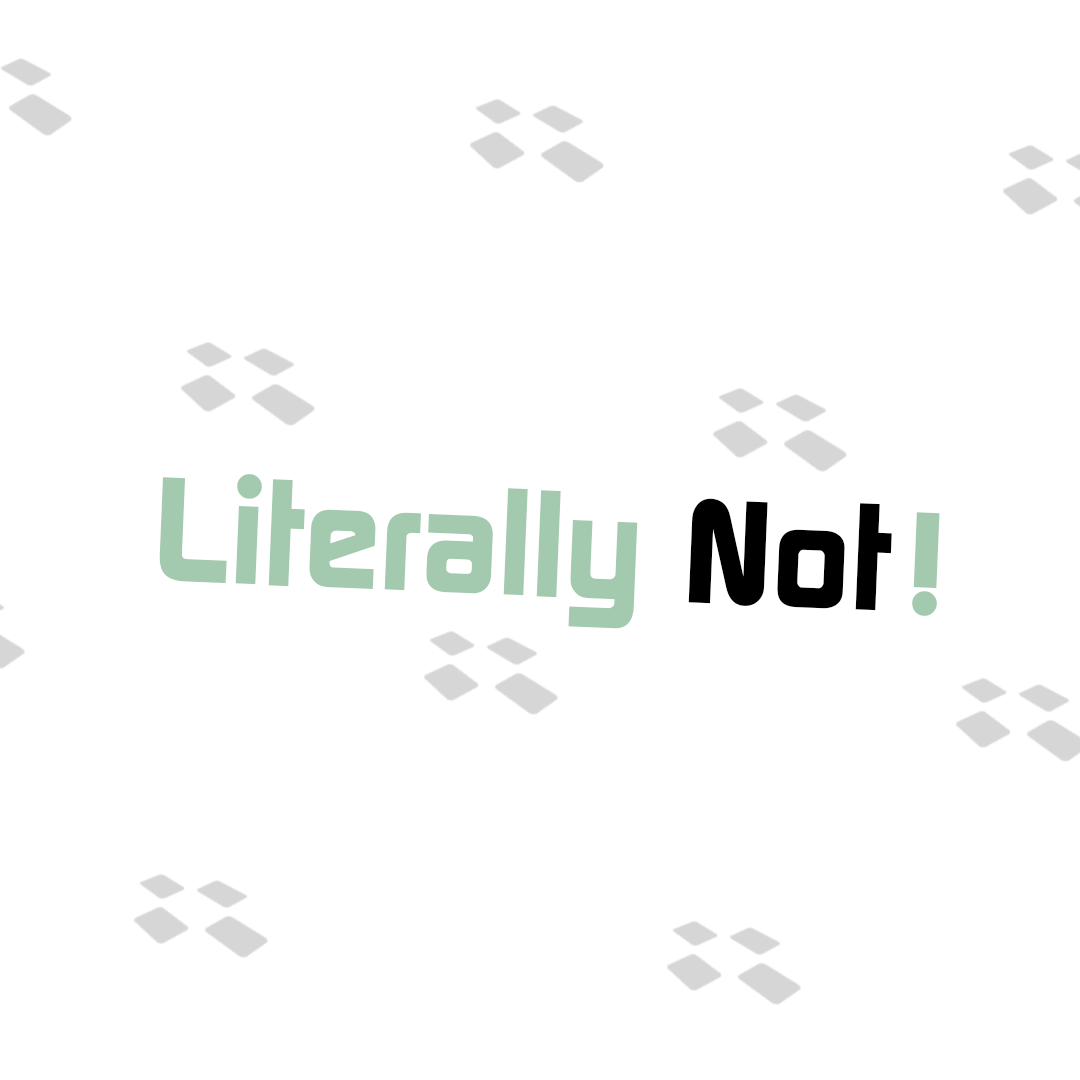
<style>
.page{position:relative;width:1080px;height:1080px;background:#ffffff}
.page>*{position:absolute;margin:0}
.t1{font:147.3px "ContinuumBold";color:#a3c9af}
.t2{font:147.3px "ContinuumBold";color:#000000}
</style>
<div class="page">
<p class="t1" style="left:159px;top:474px;width:733px;height:155px;rotate:2deg">Literally<span class="t2"> Not</span></p>
<p class="t1" style="left:912px;top:512px;width:28px;height:104px;rotate:2deg">!</p>
</div>
